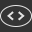
<style>
.page{position:relative;width:32px;height:32px;background:#333333}
.page>*{position:absolute;margin:0}
.t1{font:14.8px "RedHatMonoVF-Bold";color:#e5e5e5}
</style>
<div class="page">
<p class="t1" style="left:7px;top:11px;width:18px;height:10px">&lt; &gt;</p>
</div>
